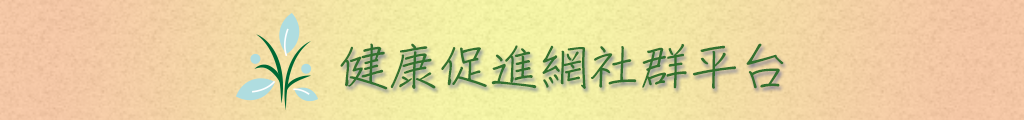
<style>
.page{position:relative;width:1024px;height:120px}
.page>*{position:absolute;margin:0}
.t1{font:50px "DFChuStd-W4";color:#33712f}
</style>
<div class="page">
<p class="t1" style="left:340px;top:43px;width:444px;height:47px">健康促進網社群平台</p>
</div>
